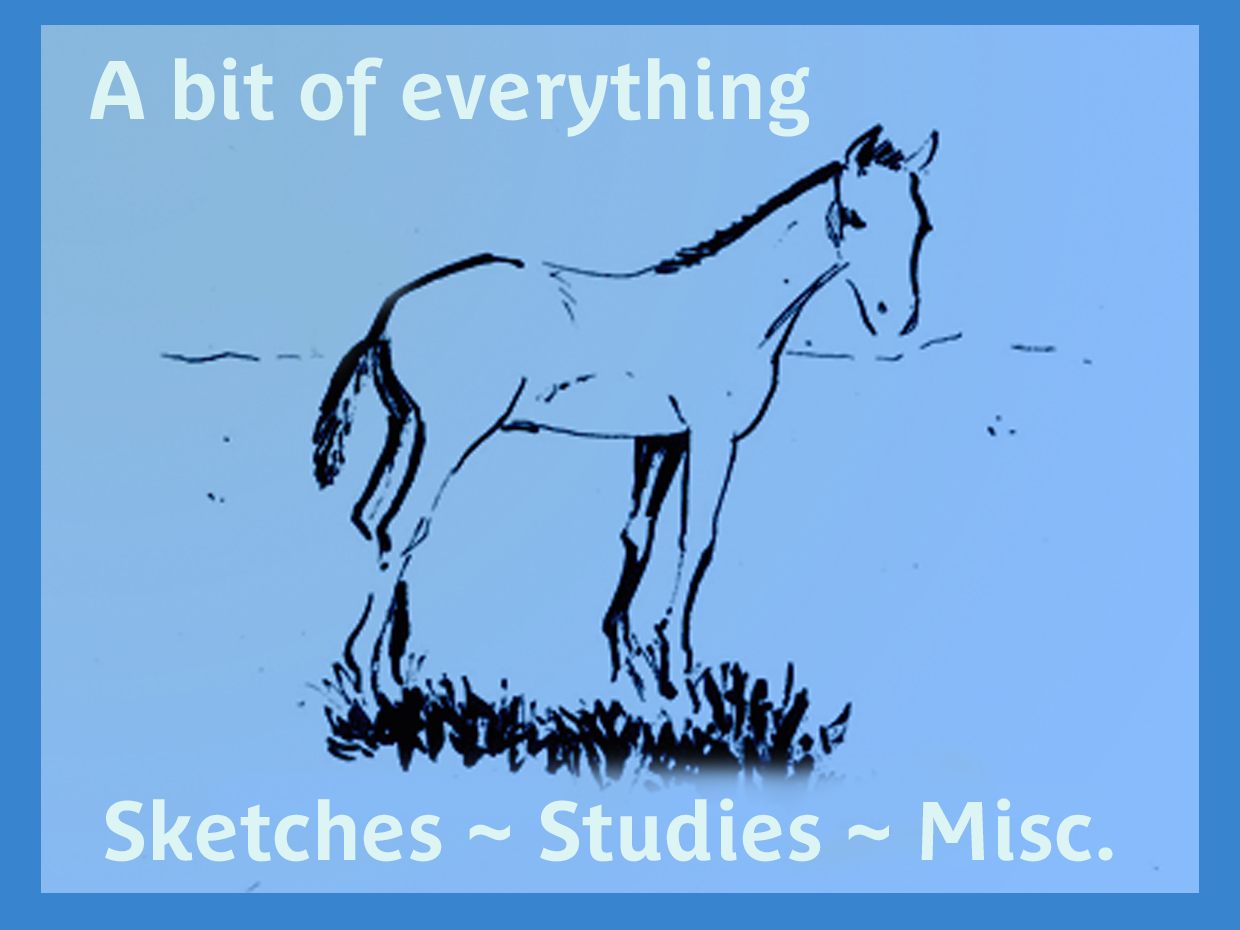
<style>
.page{position:relative;width:1240px;height:930px}
.page>*{position:absolute;margin:0}
.t1{font:82px "ParisinePlusStd-Bold";color:#dcf4f3}
</style>
<div class="page">
<p class="t1" style="left:90px;top:57px;width:720px;height:80px">A bit of everything</p>
<p class="t1" style="left:105px;top:798px;width:1008px;height:64px">Sketches ~ Studies ~ Misc.</p>
</div>
